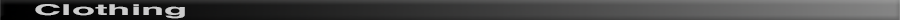
<style>
.page{position:relative;width:900px;height:20px}
.page>*{position:absolute;margin:0}
.t1{font:14.9px "Helvetica-Bold";color:#cccccc;scale:2.54 1}
</style>
<div class="page">
<p class="t1" style="left:35px;top:4px;width:150px;height:15px">Clothing</p>
</div>
